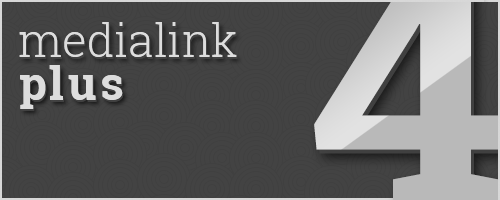
<style>
.page{position:relative;width:500px;height:200px;background:#434343}
.page>*{position:absolute;margin:0}
.t1{font:46px "RobotoSlab-Light";color:#dddddd}
.t2{font:46px "RobotoSlab-Bold";letter-spacing:0.075em;color:#dddddd}
</style>
<div class="page">
<p class="t1" style="left:19px;top:22px;width:218px;height:35px">medialink</p>
<p class="t2" style="left:20px;top:65px;width:103px;height:44px">plus</p>
</div>
